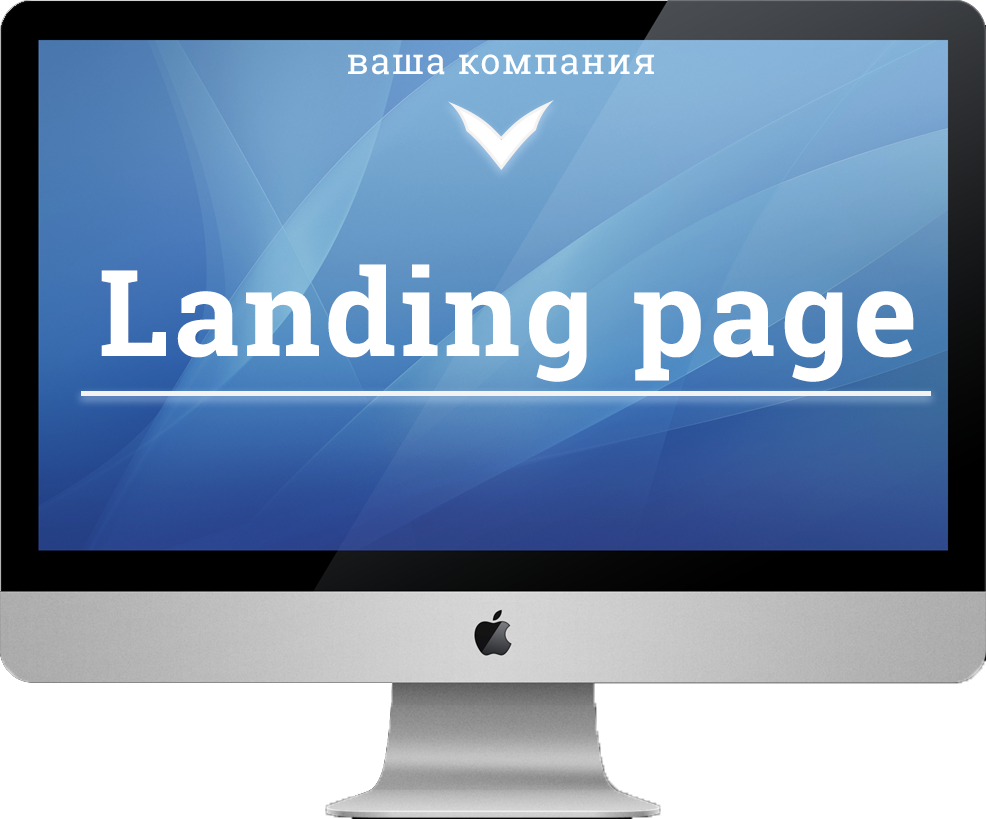
<style>
.page{position:relative;width:986px;height:819px}
.page>*{position:absolute;margin:0}
.t1{font:36px "RobotoSlab-Regular";letter-spacing:0.04em;color:#ffffff}
.t2{font:120px "RobotoSlab-Bold";letter-spacing:0.04em;color:#ffffff}
</style>
<div class="page">
<p class="t1" style="left:348px;top:54px;width:306px;height:21px">ваша компания</p>
<p class="t2" style="left:101px;top:264px;width:813px;height:118px">Landing page</p>
</div>
